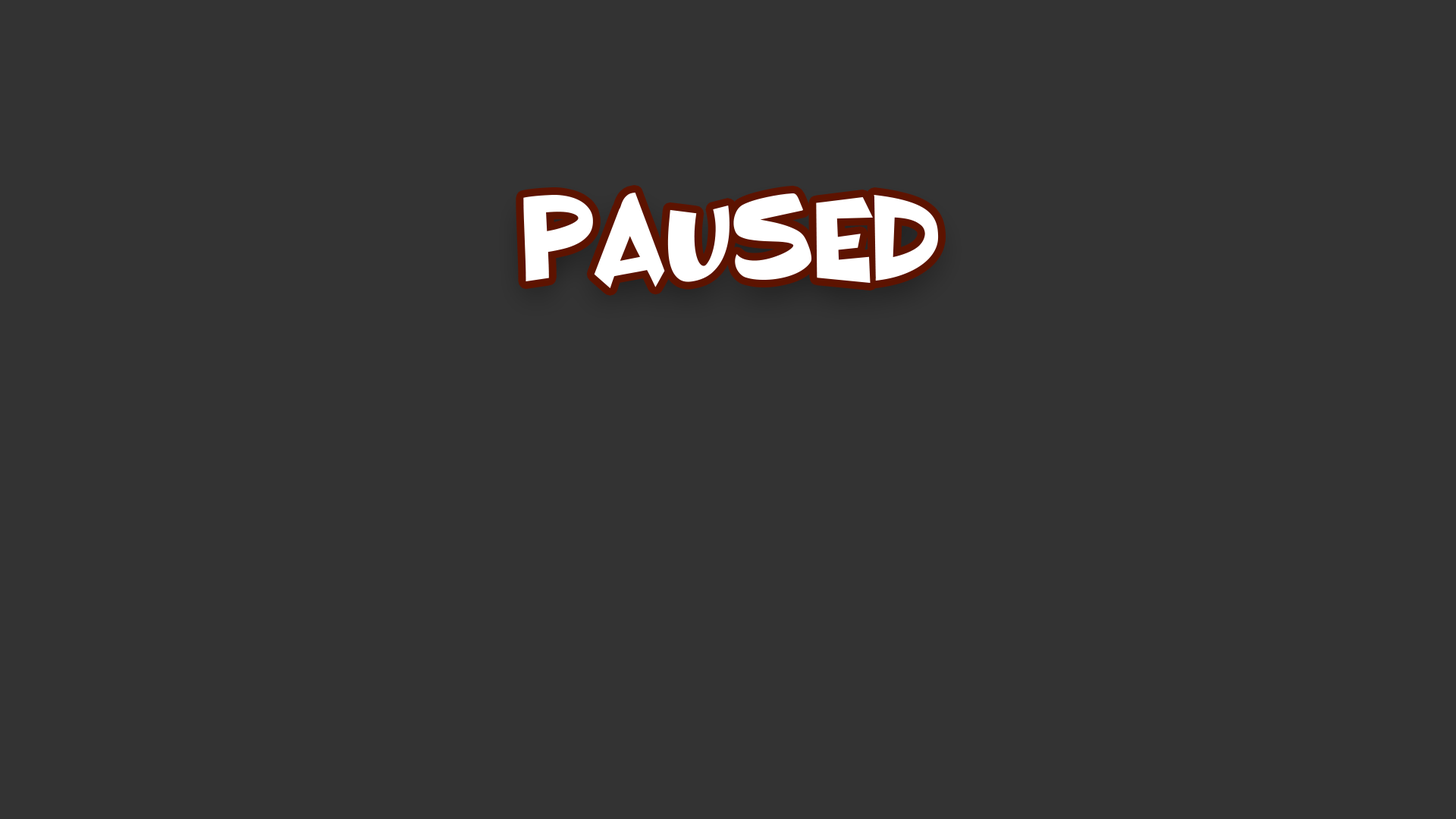
<style>
.page{position:relative;width:1456px;height:819px;background:#333333}
.page>*{position:absolute;margin:0}
.t1{font:136.8px "BLOCKHEADDUDEPersonalUse";color:#ffffff;scale:0.83 1}
</style>
<div class="page">
<p class="t1" style="left:523px;top:193px;width:416px;height:95px">PAUSED</p>
</div>
